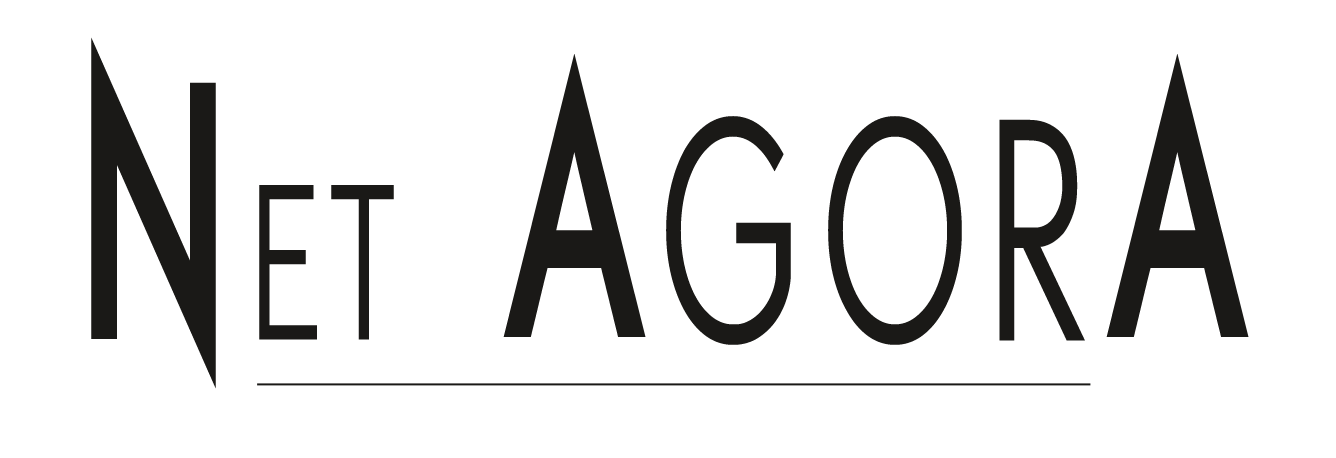
<style>
.page{position:relative;width:1336px;height:458px;background:#ffffff}
.page>*{position:absolute;margin:0}
.t1{font:350px "ETH";letter-spacing:0.1em;color:#1a1917;font-variant:small-caps;font-weight:bold;scale:0.57 1}
.t2{font:420px "ETH-Black";letter-spacing:0.1em;color:#1a1917;font-variant:small-caps;scale:0.57 1}
</style>
<div class="page">
<p class="t1" style="left:91px;top:37px;width:1158px;height:352px"><span class="t2">N</span>et <span class="t2">A</span>GOR<span class="t2">A</span></p>
</div>
